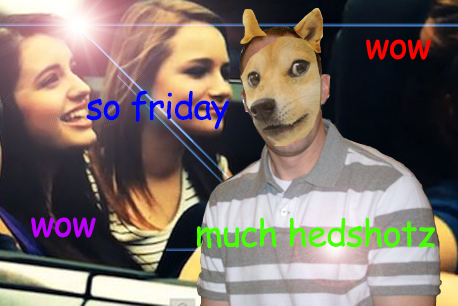
<style>
.page{position:relative;width:458px;height:306px}
.page>*{position:absolute;margin:0}
.t1{font:36px "ComicSansMS";letter-spacing:-0.025em;color:#ff0200}
.t2{font:36px "ComicSansMS";letter-spacing:-0.025em;color:#0000ff}
.t3{font:36px "ComicSansMS";letter-spacing:-0.025em;color:#c000ff}
.t4{font:36px "ComicSansMS";letter-spacing:-0.025em;color:#48ff00}
</style>
<div class="page">
<p class="t1" style="left:366px;top:39px;width:65px;height:21px">wow</p>
<p class="t2" style="left:86px;top:90px;width:144px;height:40px">so friday</p>
<p class="t3" style="left:31px;top:217px;width:65px;height:21px">wow</p>
<p class="t4" style="left:197px;top:217px;width:239px;height:32px">much hedshotz</p>
</div>
